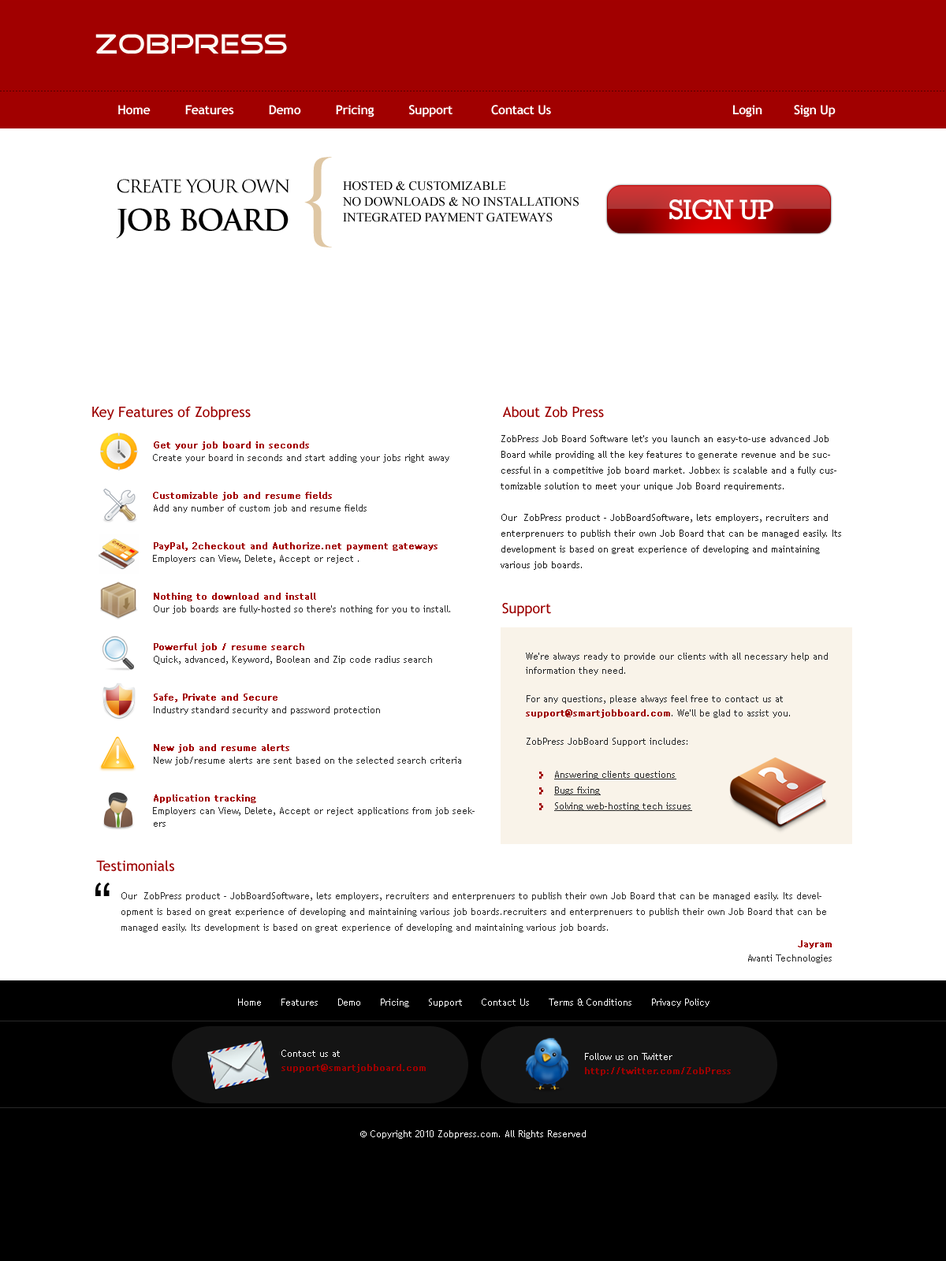
<style>
.page{position:relative;width:946px;height:1261px;background:#ffffff}
.page>*{position:absolute;margin:0}
.t1{font:28.4px "GoodTimes";color:#fdf9f4}
.t2{font:12.6px "TrebuchetMS-Bold";letter-spacing:-0.025em;color:#ffffff}
.t3{font:96.2px "BookAntiqua";letter-spacing:-0.04em;color:#dfc7a4;text-transform:uppercase}
.t4{font:17.4px "TrajanPro-Regular";letter-spacing:-0.06em;color:#000000;text-transform:uppercase}
.t5{font:12.6px/15.8px "TimesNewRomanPSMT";color:#000000;text-transform:uppercase}
.t6{font:28.9px "TrajanPro-Bold";letter-spacing:-0.04em;color:#000000;text-transform:uppercase}
.t7{font:28.4px "Rockwell";letter-spacing:-0.025em;color:#ffffff}
.t8{font:14.2px "TrebuchetMS";color:#9c0000}
.t9{font:9.5px/15.8px "TrebuchetMS";color:#1d1d1d}
.t10{font:9.5px/12.6px "TrebuchetMS";color:#292929}
.t11{font:9.5px/12.6px "TrebuchetMS";color:#a10000;font-weight:bold}
.t12{font:9.5px/14.2px "TrebuchetMS";color:#292929}
.t13{font:9.5px/14.2px "TrebuchetMS";color:#9c0000;font-weight:bold}
.t14{font:9.5px/15.8px "TrebuchetMS";color:#292929;text-decoration:underline}
.t15{font:56.7px "ArialMT";color:#000000}
.t16{font:9.5px/15.8px "TrebuchetMS";color:#292929}
.t17{font:9.5px/14.2px "TrebuchetMS";color:#a10000;font-weight:bold}
.t18{font:9.5px "TrebuchetMS";color:#ffffff}
.t19{font:9.5px/14.2px "TrebuchetMS";color:#ffffff}
</style>
<div class="page">
<p class="t1" style="left:95px;top:34px;width:192px;height:20px">Zobpress</p>
<p class="t2" style="left:118px;top:105px;width:717px;height:12px">Home          Features          Demo          Pricing          Support           Contact Us                                                    Login         Sign Up</p>
<p class="t3" style="left:304px;top:157px;width:28px;height:90px">{</p>
<p class="t4" style="left:117px;top:179px;width:172px;height:14px">Create your own</p>
<p class="t5" style="left:342px;top:181px;width:236px;height:41px">hosted &amp; customizable<br>no downloads &amp; no installations<br>integrated Payment gateways</p>
<p class="t6" style="left:116px;top:208px;width:172px;height:31px">Job board</p>
<p class="t7" style="left:669px;top:199px;width:104px;height:21px">SIGN UP</p>
<p class="t8" style="left:92px;top:406px;width:159px;height:14px">Key Features of Zobpress</p>
<p class="t8" style="left:502px;top:406px;width:102px;height:12px">About Zob Press</p>
<p class="t9" style="left:500px;top:435px;width:341px;height:135px">ZobPress Job Board Software let's you launch an easy-to-use advanced Job Board while providing all the key features to generate revenue and be successful in a competitive job board market. Jobbex is scalable and a fully customizable solution to meet your unique Job Board requirements.<br><br>Our  ZobPress product - JobBoardSoftware, lets employers, recruiters and enterprenuers to publish their own Job Board that can be managed easily. Its development is based on great experience of developing and maintaining various job boards.</p>
<p class="t10" style="left:153px;top:441px;width:321px;height:386px"><span class="t11">Get your job board in seconds<br></span>Create your board in seconds and start adding your jobs right away<br><br><br><span class="t11">Customizable job and resume fields<br></span>Add any number of custom job and resume fields<br><br><br><span class="t11">PayPal, 2checkout and Authorize.net payment gateways<br></span>Employers can View, Delete, Accept or reject .<br><br><br><span class="t11">Nothing to download and install<br></span>Our job boards are fully-hosted so there's nothing for you to install.<br><br><br><span class="t11">Powerful job / resume search<br></span>Quick, advanced, Keyword, Boolean and Zip code radius search<br><br><br><span class="t11">Safe, Private and Secure<br></span>Industry standard security and password protection<br><br><br><span class="t11">New job and resume alerts<br></span>New job/resume alerts are sent based on the selected search criteria<br><br><br><span class="t11">Application tracking<br></span>Employers can View, Delete, Accept or reject applications from job seekers</p>
<p class="t8" style="left:502px;top:603px;width:49px;height:13px">Support</p>
<p class="t12" style="left:526px;top:653px;width:301px;height:93px">We're always ready to provide our clients with all necessary help and information they need. <br><br>For any questions, please always feel free to contact us at <span class="t13">support@smartjobboard.com</span>. We'll be glad to assist you.<br><br>ZobPress JobBoard Support includes:</p>
<p class="t14" style="left:554px;top:771px;width:138px;height:40px">Answering clients questions<br>Bugs fixing<br>Solving web-hosting tech issues</p>
<p class="t8" style="left:96px;top:860px;width:78px;height:12px">Testimonials</p>
<p class="t15" style="left:95px;top:882px;width:15px;height:14px">“</p>
<p class="t16" style="left:121px;top:892px;width:705px;height:40px">Our  ZobPress product - JobBoardSoftware, lets employers, recruiters and enterprenuers to publish their own Job Board that can be managed easily. Its development is based on great experience of developing and maintaining various job boards.recruiters and enterprenuers to publish their own Job Board that can be managed easily. Its development is based on great experience of developing and maintaining various job boards.</p>
<p class="t12" style="left:748px;top:940px;width:83px;height:23px;text-align:right"><span class="t17">Jayram<br></span>Avanti Technologies</p>
<p class="t18" style="left:238px;top:998px;width:471px;height:9px">Home      Features      Demo      Pricing      Support      Contact Us      Terms &amp; Conditions      Privacy Policy</p>
<p class="t13" style="left:281px;top:1050px;width:145px;height:23px"><span class="t19">Contact us at <br></span>support@smartjobboard.com</p>
<p class="t13" style="left:585px;top:1053px;width:146px;height:23px"><span class="t19">Follow us on Twitter<br></span>http://twitter.com/ZobPress</p>
<p class="t18" style="left:360px;top:1130px;width:226px;height:9px">© Copyright 2010 Zobpress.com. All Rights Reserved</p>
</div>
